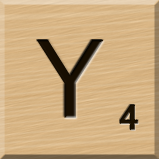
<style>
.page{position:relative;width:159px;height:159px}
.page>*{position:absolute;margin:0}
.t1{font:116px "MS-UIGothic";color:#180e01}
.t2{font:36px "MS-UIGothic";color:#1c1101;font-weight:bold;scale:1.1 1}
</style>
<div class="page">
<p class="t1" style="left:37px;top:40px;width:67px;height:78px">Y</p>
<p class="t2" style="left:119px;top:104px;width:20px;height:27px">4</p>
</div>
